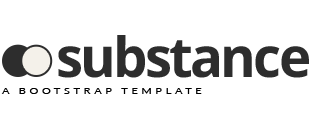
<style>
.page{position:relative;width:333px;height:114px;background:#ffffff}
.page>*{position:absolute;margin:0}
.t1{font:55.3px "OpenSans-Bold";letter-spacing:-0.05em;color:#2d2d2d}
.t2{font:8.6px "Lato-Regular";letter-spacing:0.3em;color:#000000;text-transform:uppercase;scale:1.31 1}
</style>
<div class="page">
<p class="t1" style="left:58px;top:35px;width:251px;height:43px">substance</p>
<p class="t2" style="left:1px;top:88px;width:201px;height:6px">A Bootstrap Template</p>
</div>
